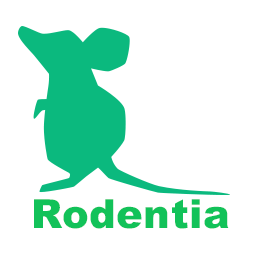
<style>
.page{position:relative;width:256px;height:256px;background:#ffffff}
.page>*{position:absolute;margin:0}
.t1{font:40.1px "Arial-Black";letter-spacing:0.01em;color:#12c259}
.t2{font:40.1px "Arial-Black";letter-spacing:0.005em;color:#12c259}
</style>
<div class="page">
<p class="t1" style="left:34px;top:199px;width:195px;height:30px"><span class="t2">R</span>o<span class="t2">d</span>entia</p>
</div>
